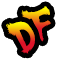
<style>
.page{position:relative;width:60px;height:60px;background:#ffffff}
.page>*{position:absolute;margin:0}
.t1{font:30px "SSF4-ABUKET-Regular"}
</style>
<div class="page">
<p class="t1" style="left:21px;top:6px;width:30px;height:36px">F</p>
<p class="t1" style="left:6px;top:21px;width:29px;height:33px">D</p>
</div>
